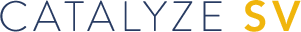
<style>
.page{position:relative;width:301px;height:32px;background:#ffffff}
.page>*{position:absolute;margin:0}
.t1{font:42.6px "BrandonGrotesque-Light";letter-spacing:0.112em;color:#283b62}
.t2{font:42.6px "Avenir-Heavy";letter-spacing:0.112em;color:#f0b50c}
</style>
<div class="page">
<p class="t1" style="left:0px;top:0px;width:301px;height:32px">CATALYZE <span class="t2">SV</span></p>
</div>
